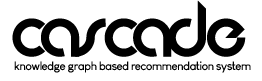
<style>
.page{position:relative;width:262px;height:81px;background:#ffffff}
.page>*{position:absolute;margin:0}
.t1{font:76px "JKAbode-Demo";letter-spacing:-0.081em;color:#000000}
.t2{font:76px "JKAbode-Demo";letter-spacing:-0.041em;color:#000000}
.t3{font:12px "LouisGeorgeCafe-Bold";letter-spacing:-0.061em;color:#000000}
</style>
<div class="page">
<p class="t1" style="left:12px;top:0px;width:234px;height:57px">CA<span class="t2">S</span>CA<span class="t2">DE</span></p>
<p class="t3" style="left:14px;top:61px;width:237px;height:12px">knowledge graph based recommendation system</p>
</div>
